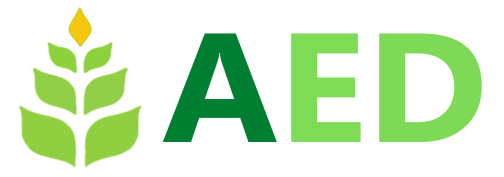
<style>
.page{position:relative;width:504px;height:177px;background:#ffffff}
.page>*{position:absolute;margin:0}
.t1{font:155.2px "Ebrima-Bold";color:#007e32;scale:1.06 1}
.t2{font:155.2px "Ebrima-Bold";color:#7ddb55;scale:1.06 1}
.t3{font:155.2px "Ebrima-Bold";color:#7ed956;scale:1.06 1}
</style>
<div class="page">
<p class="t1" style="left:162px;top:33px;width:320px;height:109px">A<span class="t2">E</span><span class="t3">D</span></p>
</div>
